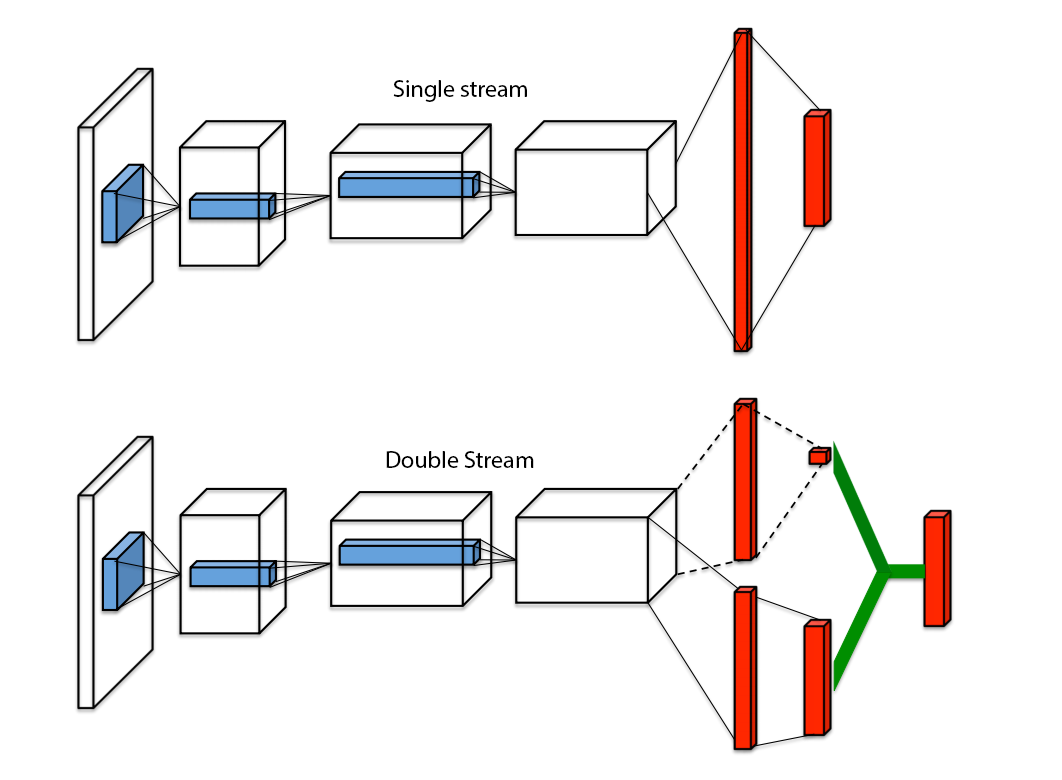
<style>
.page{position:relative;width:1062px;height:780px;background:#ffffff}
.page>*{position:absolute;margin:0}
.t1{font:24px "MyriadPro-Regular";color:#000000}
</style>
<div class="page">
<p class="t1" style="left:393px;top:80px;width:134px;height:22px">Single stream</p>
<p class="t1" style="left:386px;top:451px;width:148px;height:17px">Double Stream</p>
</div>
